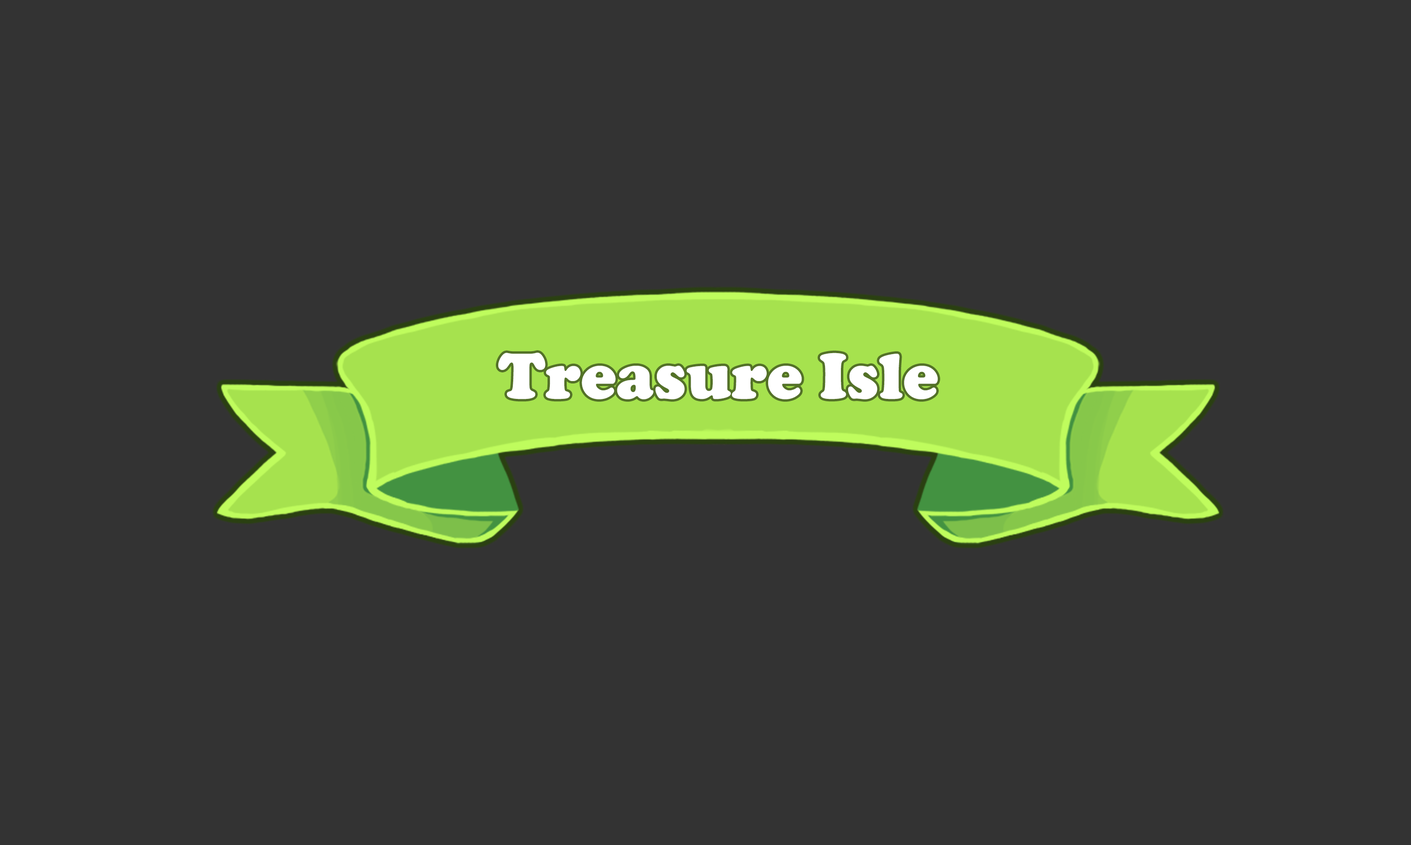
<style>
.page{position:relative;width:1411px;height:845px;background:#333333}
.page>*{position:absolute;margin:0}
.t1{font:66.9px "CooperBlack";color:#ffffff}
</style>
<div class="page">
<p class="t1" style="left:498px;top:353px;width:440px;height:46px">Treasure Isle</p>
</div>
